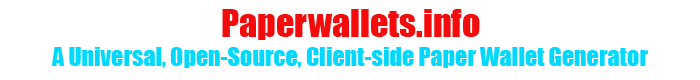
<style>
.page{position:relative;width:700px;height:80px;background:#ffffff}
.page>*{position:absolute;margin:0}
.t1{font:36px "Impact";color:#f40b0b}
.t2{font:24px "Impact";color:#00d8ff}
</style>
<div class="page">
<p class="t1" style="left:222px;top:9px;width:258px;height:31px">Paperwallets.info</p>
<p class="t2" style="left:52px;top:47px;width:596px;height:21px">A Universal, Open-Source, Client-side Paper Wallet Generator</p>
</div>
